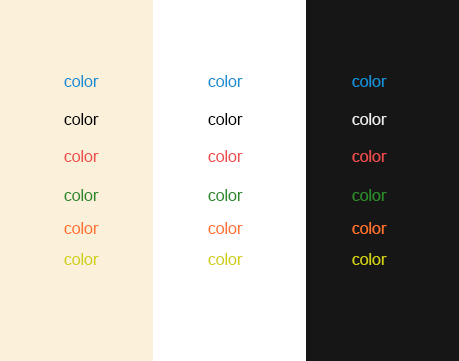
<style>
.page{position:relative;width:459px;height:361px;background:#ffffff}
.page>*{position:absolute;margin:0}
.t1{font:16px "ArialMT";color:#158ed3}
.t2{font:16px "ArialMT";color:#2b8a29}
.t3{font:16px "ArialMT";color:#ff732e}
.t4{font:16px "ArialMT";color:#d1cf13}
</style>
<div class="page">
<p class="t1" style="left:64px;top:75px;width:323px;height:12px">color    color    color</p>
<p class="t2" style="left:64px;top:189px;width:323px;height:12px">color    color    color</p>
<p class="t3" style="left:64px;top:222px;width:323px;height:12px">color    color    color</p>
<p class="t4" style="left:64px;top:253px;width:323px;height:12px">color    color    color</p>
</div>
